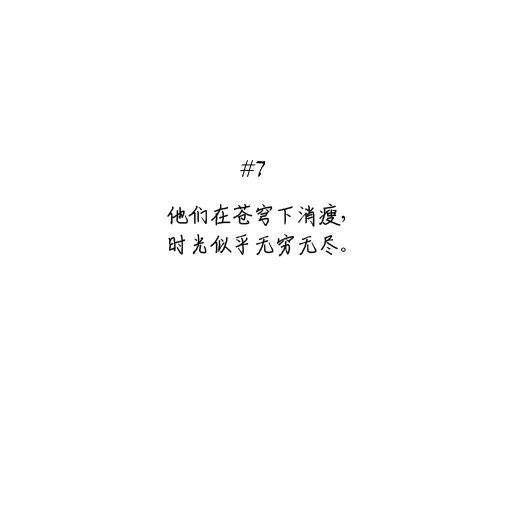
<style>
.page{position:relative;width:512px;height:512px;background:#ffffff}
.page>*{position:absolute;margin:0}
.t1{font:24px/30px "ShouShuti";letter-spacing:-0.1em;color:#000000}
</style>
<div class="page">
<p class="t1" style="left:167px;top:203px;width:179px;height:54px;text-align:center">他们在苍穹下消瘦，<br>时光似乎无穷无尽。</p>
</div>
